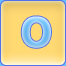
<style>
.page{position:relative;width:66px;height:66px}
.page>*{position:absolute;margin:0}
.t1{font:41px "Tahoma-Bold"}
</style>
<div class="page">
<p class="t1" style="left:21px;top:16px;width:30px;height:32px">О</p>
<p class="t1" style="left:21px;top:16px;width:30px;height:32px">О</p>
</div>
